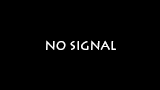
<style>
.page{position:relative;width:160px;height:90px;background:#000000}
.page>*{position:absolute;margin:0}
.t1{font:12px "LithosPro-Regular";color:#ffffff}
</style>
<div class="page">
<p class="t1" style="left:46px;top:40px;width:70px;height:10px">NO SIGNAL</p>
</div>
